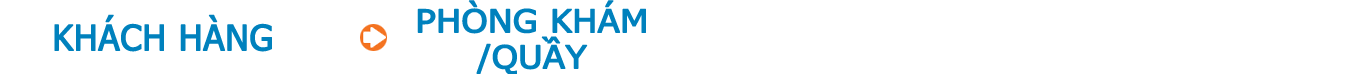
<style>
.page{position:relative;width:1366px;height:75px;background:#ffffff}
.page>*{position:absolute;margin:0}
.t1{font:31.5px "Tahoma";color:#0081bd;font-weight:bold;scale:1.14 1}
.t2{font:35px "Tahoma";color:#0081bd;font-weight:bold}
</style>
<div class="page">
<p class="t1" style="left:417px;top:0px;width:229px;height:74px;text-align:center">PHÒNG KHÁM<br>/QUẦY</p>
<p class="t2" style="left:54px;top:14px;width:218px;height:38px">KHÁCH HÀNG</p>
</div>
